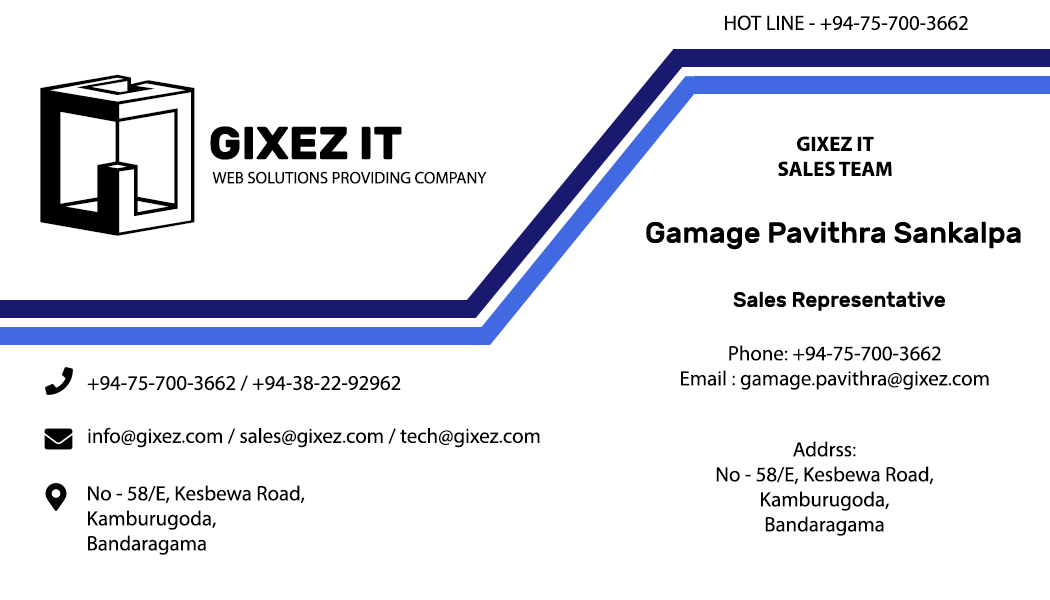
<style>
.page{position:relative;width:1050px;height:600px;background:#ffffff}
.page>*{position:absolute;margin:0}
.t1{font:20.8px "MyriadPro-Regular";color:#000000}
.t2{font:171.5px "D3-Cubism";color:#000000}
.t3{font:45.8px "Rubik-Bold";color:#000000}
.t4{font:20.8px "MyriadPro-Bold";color:#000000}
.t5{font:16.7px "MyriadPro-Regular";color:#000000}
.t6{font:29.2px "Rubik-Medium";color:#000000}
.t7{font:20.8px "Rubik-Medium";color:#000000}
</style>
<div class="page">
<p class="t1" style="left:725px;top:15px;width:243px;height:16px">HOT LINE - +94-75-700-3662</p>
<p class="t2" style="left:40px;top:74px;width:155px;height:162px">G</p>
<p class="t3" style="left:210px;top:126px;width:192px;height:34px">GIXEZ IT</p>
<p class="t4" style="left:778px;top:136px;width:114px;height:40px;text-align:center">GIXEZ IT<br>SALES TEAM</p>
<p class="t5" style="left:212px;top:171px;width:275px;height:13px">WEB SOLUTIONS PROVIDING COMPANY</p>
<p class="t6" style="left:646px;top:221px;width:375px;height:29px">Gamage Pavithra Sankalpa</p>
<p class="t7" style="left:733px;top:291px;width:212px;height:20px">Sales Representative</p>
<p class="t1" style="left:681px;top:345px;width:308px;height:45px;text-align:center">Phone: +94-75-700-3662<br>Email : gamage.pavithra@gixez.com</p>
<p class="t1" style="left:87px;top:375px;width:314px;height:16px">+94-75-700-3662 / +94-38-22-92962</p>
<p class="t1" style="left:88px;top:427px;width:452px;height:21px">info@gixez.com / sales@gixez.com / tech@gixez.com</p>
<p class="t1" style="left:716px;top:441px;width:218px;height:95px;text-align:center">Addrss:<br>No - 58/E, Kesbewa Road,<br>Kamburugoda,<br>Bandaragama</p>
<p class="t1" style="left:88px;top:485px;width:217px;height:70px">No - 58/E, Kesbewa Road,<br>Kamburugoda,<br>Bandaragama</p>
</div>
